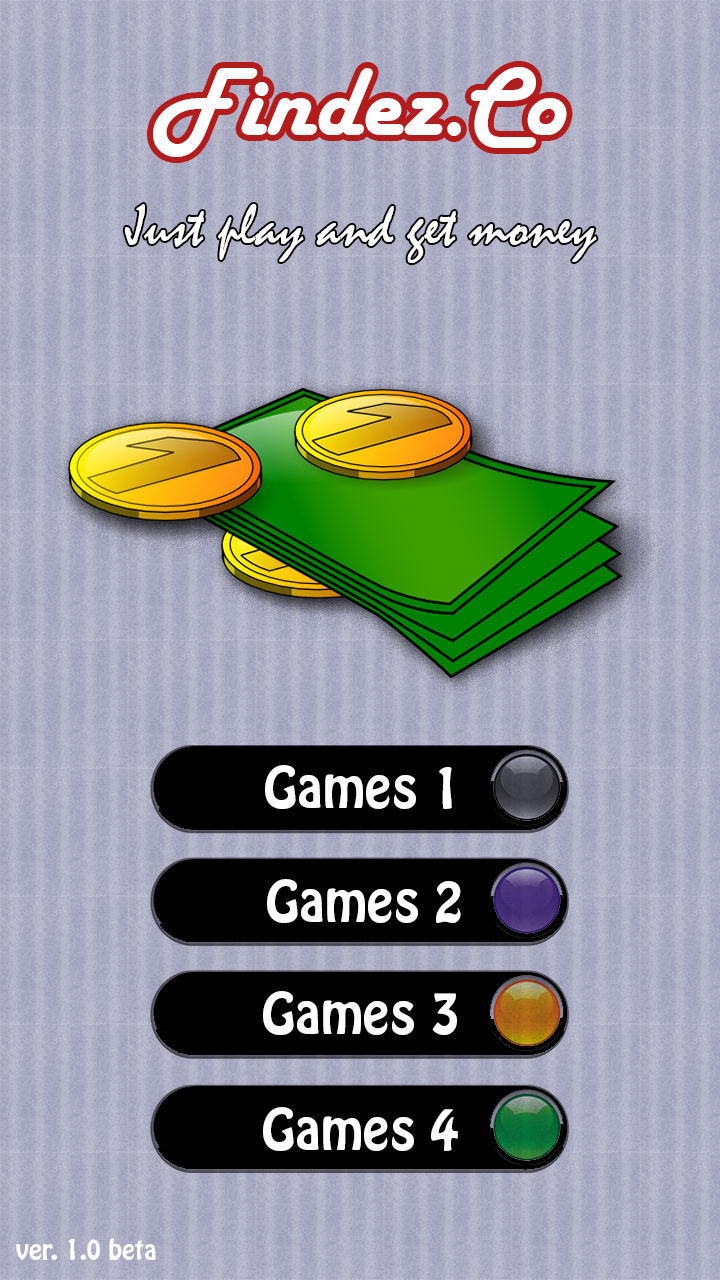
<style>
.page{position:relative;width:720px;height:1280px}
.page>*{position:absolute;margin:0}
.t1{font:100px "HarlowSolid";color:#ffffff}
.t2{font:59.8px "Mistral";color:#ffffff}
.t3{font:50px "HoboStd";color:#ffffff}
.t4{font:25px "HoboStd";color:#ffffff}
</style>
<div class="page">
<p class="t1" style="left:153px;top:67px;width:414px;height:90px">Findez.Co</p>
<p class="t2" style="left:124px;top:204px;width:473px;height:59px">Just play and get money</p>
<p class="t3" style="left:265px;top:765px;width:187px;height:44px">Games 1</p>
<p class="t3" style="left:267px;top:879px;width:194px;height:44px">Games 2</p>
<p class="t3" style="left:263px;top:991px;width:194px;height:44px">Games 3</p>
<p class="t3" style="left:263px;top:1107px;width:195px;height:44px">Games 4</p>
<p class="t4" style="left:16px;top:1238px;width:140px;height:22px">ver. 1.0 beta</p>
</div>
